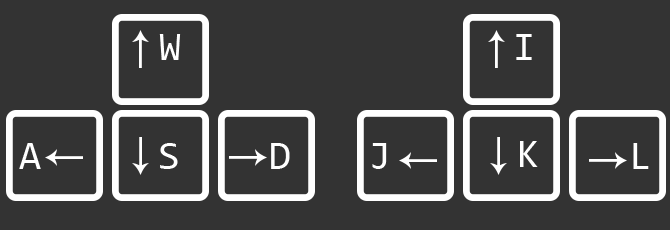
<style>
.page{position:relative;width:670px;height:230px;background:#333333}
.page>*{position:absolute;margin:0}
.t1{font:40px "Consolas";color:#ffffff}
</style>
<div class="page">
<p class="t1" style="left:159px;top:34px;width:22px;height:26px">W</p>
<p class="t1" style="left:516px;top:34px;width:16px;height:26px">I</p>
<p class="t1" style="left:19px;top:143px;width:22px;height:26px">A</p>
<p class="t1" style="left:160px;top:143px;width:18px;height:26px">S</p>
<p class="t1" style="left:271px;top:143px;width:19px;height:26px">D</p>
<p class="t1" style="left:372px;top:143px;width:15px;height:26px">J</p>
<p class="t1" style="left:520px;top:141px;width:18px;height:26px">K</p>
<p class="t1" style="left:633px;top:143px;width:16px;height:26px">L</p>
</div>
